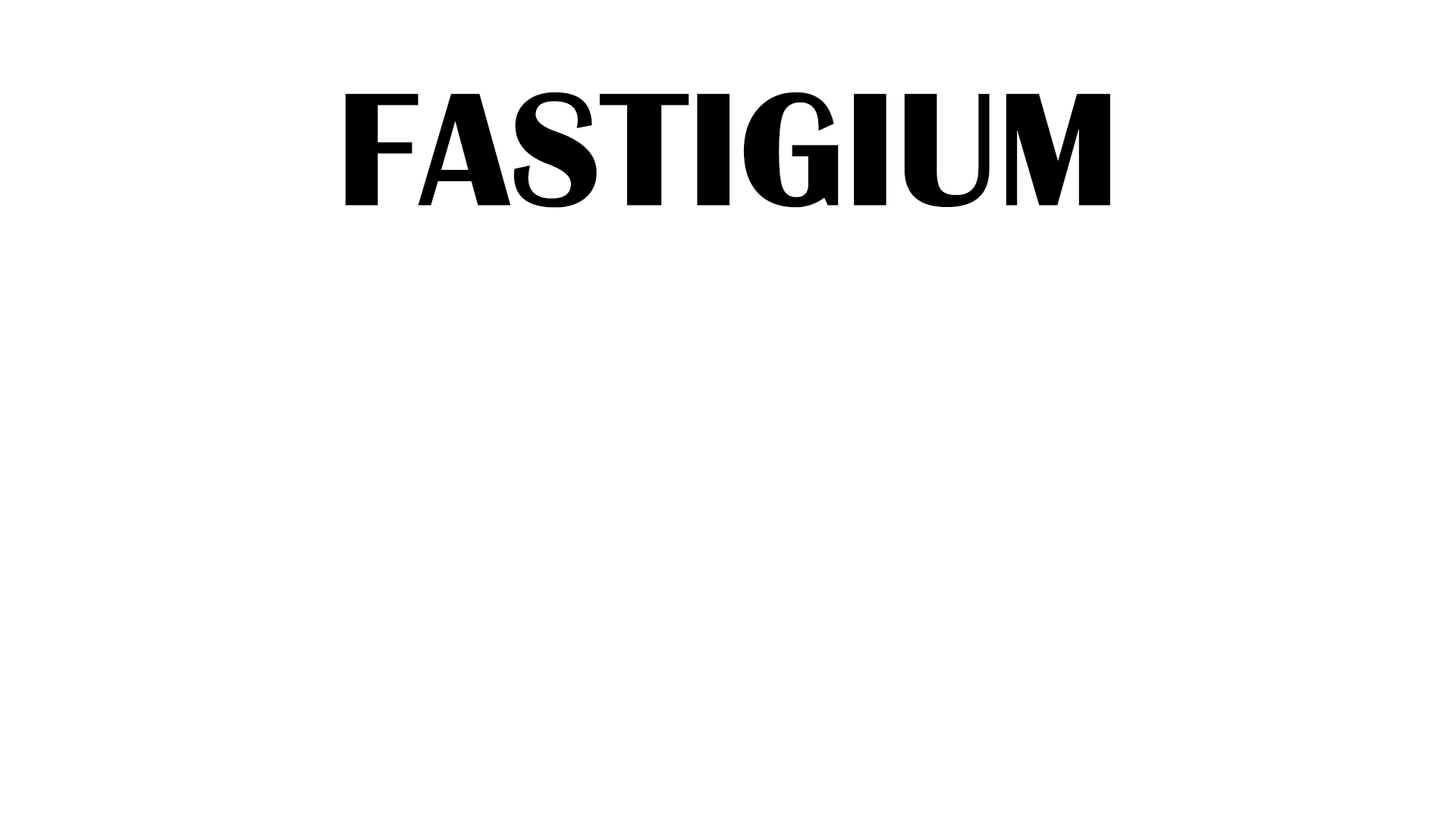
<style>
.page{position:relative;width:1456px;height:819px;background:#ffffff}
.page>*{position:absolute;margin:0}
.t1{font:166.8px "BritannicBold";color:#000000}
</style>
<div class="page">
<p class="t1" style="left:345px;top:92px;width:765px;height:116px">FASTIGIUM</p>
</div>
